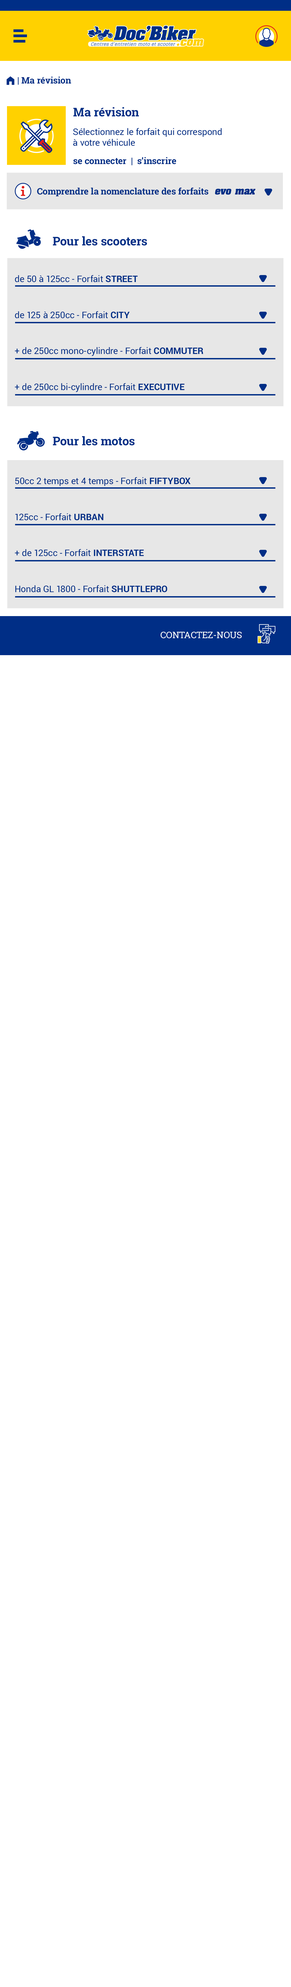
<style>
.page{position:relative;width:291px;height:1987px;background:#ffffff}
.page>*{position:absolute;margin:0}
.t1{font:9px "RobotoSlab-Bold";color:#002e86}
.t2{font:9px "FoundationIconsGeneral-Reg";color:#002e86}
.t3{font:12px "RobotoSlab-Bold";color:#002e86}
.t4{font:9px "Roboto-Regular";color:#002e86}
.t5{font:9px "Aachen-Bold";color:#002e86;font-style:italic}
.t6{font:9px/36px "Roboto-Regular";color:#002e86}
.t7{font:9px/36px "Roboto-Bold";color:#002e86}
.t8{font:9px "RobotoSlab-Regular";color:#ffffff;text-transform:uppercase}
</style>
<div class="page">
<p class="t1" style="left:6px;top:76px;width:65px;height:9px"><span class="t2">m </span>| Ma révision</p>
<p class="t3" style="left:73px;top:107px;width:66px;height:10px">Ma révision</p>
<p class="t4" style="left:73px;top:128px;width:149px;height:18px">Sélectionnez le forfait qui correspond <br>à votre véhicule</p>
<p class="t1" style="left:73px;top:157px;width:103px;height:8px">se connecter  |  s’inscrire</p>
<p class="t1" style="left:37px;top:187px;width:171px;height:9px">Comprendre la nomenclature des forfaits</p>
<p class="t5" style="left:215px;top:189px;width:16px;height:6px">evo</p>
<p class="t5" style="left:235px;top:189px;width:20px;height:6px">max</p>
<p class="t3" style="left:53px;top:236px;width:94px;height:10px">Pour les scooters</p>
<p class="t6" style="left:15px;top:275px;width:188px;height:117px">de 50 à 125cc - Forfait <span class="t7">STREET<br></span>de 125 à 250cc - Forfait <span class="t7">CITY<br></span>+ de 250cc mono-cylindre - Forfait <span class="t7">COMMUTER<br></span>+ de 250cc bi-cylindre - Forfait <span class="t7">EXECUTIVE</span></p>
<p class="t3" style="left:53px;top:436px;width:82px;height:9px">Pour les motos</p>
<p class="t6" style="left:15px;top:477px;width:175px;height:115px">50cc 2 temps et 4 temps - Forfait <span class="t7">FIFTYBOX<br></span>125cc - Forfait <span class="t7">URBAN<br></span>+ de 125cc - Forfait <span class="t7">INTERSTATE<br></span>Honda GL 1800 - Forfait <span class="t7">SHUTTLEPRO</span></p>
<p class="t8" style="left:161px;top:632px;width:81px;height:6px">contactez-nous</p>
</div>
